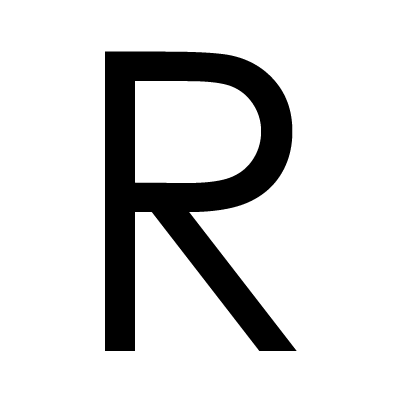
<style>
.page{position:relative;width:400px;height:400px;background:#ffffff}
.page>*{position:absolute;margin:0}
.t1{font:416.7px "CenturyGothic";color:#000000}
</style>
<div class="page">
<p class="t1" style="left:105px;top:51px;width:192px;height:300px">R</p>
</div>
